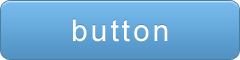
<style>
.page{position:relative;width:240px;height:60px}
.page>*{position:absolute;margin:0}
.t1{font:30px "ArialMT";letter-spacing:0.1em;color:#ffffff}
</style>
<div class="page">
<p class="t1" style="left:73px;top:19px;width:95px;height:23px">button</p>
</div>
